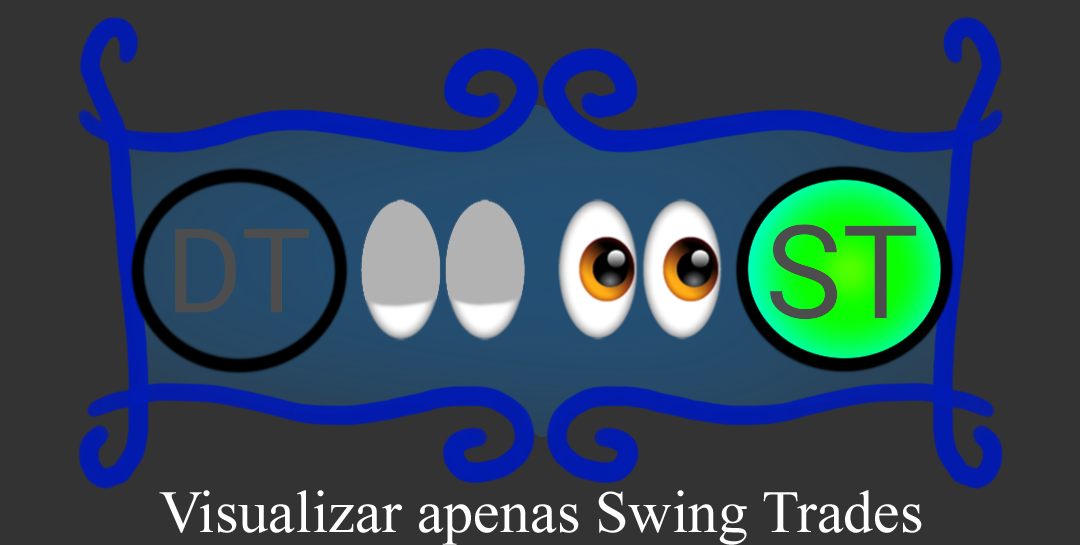
<style>
.page{position:relative;width:1080px;height:545px;background:#333333}
.page>*{position:absolute;margin:0}
.t1{font:60px "TimesNewRomanPSMT";color:#ffffff}
</style>
<div class="page">
<p class="t1" style="left:159px;top:490px;width:763px;height:55px">Visualizar apenas Swing Trades</p>
</div>
